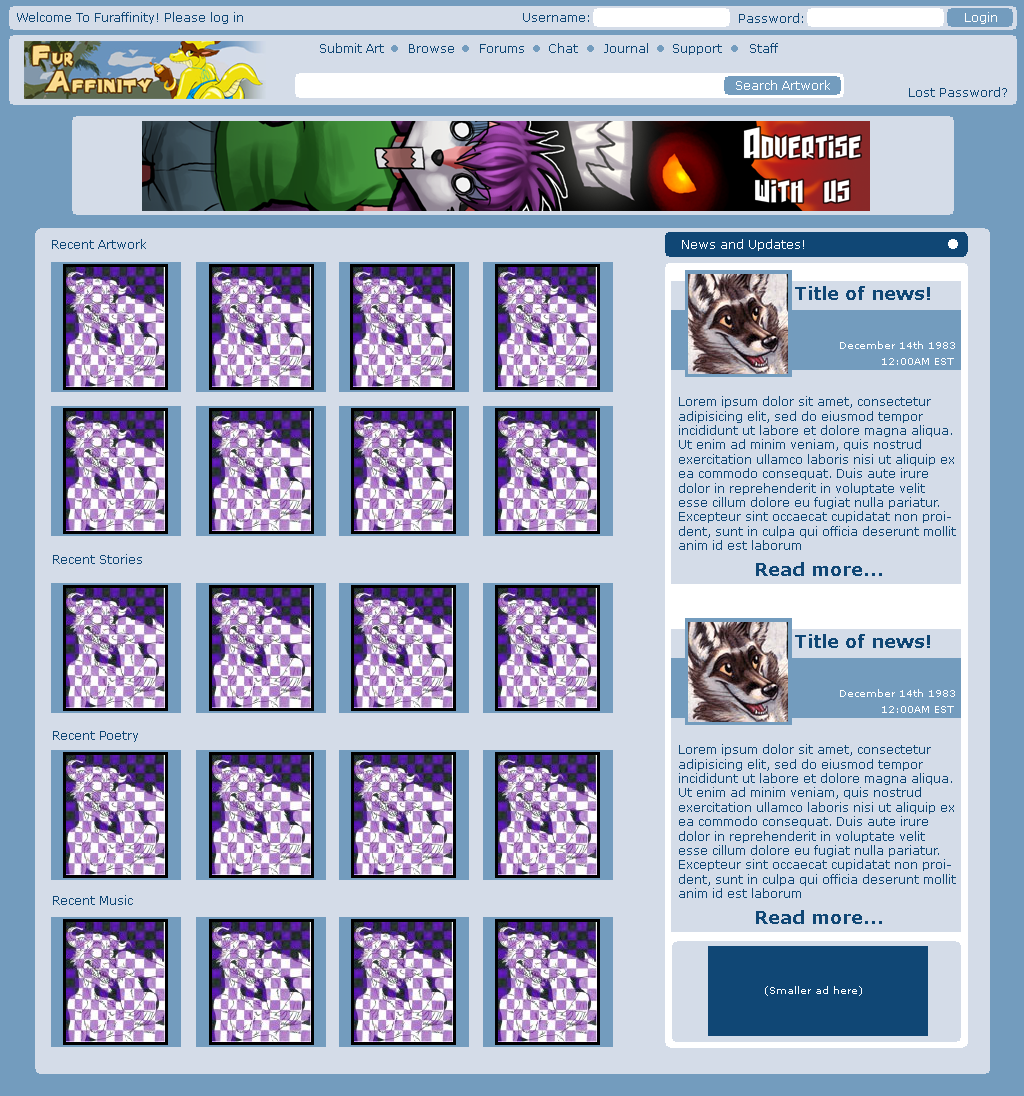
<style>
.page{position:relative;width:1024px;height:1096px;background:#d4dce8}
.page>*{position:absolute;margin:0}
.t1{font:12px "Verdana";color:#104775}
.t2{font:12px "Verdana";color:#ffffff}
.t3{font:18px "Verdana-Bold";color:#104775}
.t4{font:10px "Verdana";color:#ffffff}
</style>
<div class="page">
<p class="t1" style="left:17px;top:12px;width:226px;height:12px">Welcome To Furaffinity! Please log in</p>
<p class="t1" style="left:523px;top:13px;width:66px;height:9px">Username:</p>
<p class="t1" style="left:739px;top:13px;width:64px;height:10px">Password:</p>
<p class="t2" style="left:965px;top:12px;width:32px;height:12px">Login</p>
<p class="t1" style="left:320px;top:43px;width:64px;height:10px">Submit Art</p>
<p class="t1" style="left:409px;top:44px;width:45px;height:9px">Browse</p>
<p class="t1" style="left:480px;top:44px;width:44px;height:9px">Forums</p>
<p class="t1" style="left:549px;top:43px;width:29px;height:10px">Chat</p>
<p class="t1" style="left:604px;top:43px;width:44px;height:10px">Journal</p>
<p class="t1" style="left:673px;top:44px;width:49px;height:11px">Support</p>
<p class="t1" style="left:750px;top:43px;width:28px;height:10px">Staff</p>
<p class="t2" style="left:736px;top:80px;width:94px;height:10px">Search Artwork</p>
<p class="t1" style="left:909px;top:87px;width:98px;height:10px">Lost Password?</p>
<p class="t1" style="left:52px;top:239px;width:94px;height:10px">Recent Artwork</p>
<p class="t2" style="left:682px;top:239px;width:122px;height:12px">News and Updates!</p>
<p class="t3" style="left:795px;top:286px;width:135px;height:14px">Title of news!</p>
<p class="t4" style="left:840px;top:341px;width:115px;height:8px">December 14th 1983</p>
<p class="t4" style="left:882px;top:358px;width:72px;height:7px">12:00AM EST</p>
<p class="t1" style="left:679px;top:396px;width:277px;height:154px">Lorem ipsum dolor sit amet, consectetur adipisicing elit, sed do eiusmod tempor incididunt ut labore et dolore magna aliqua. Ut enim ad minim veniam, quis nostrud exercitation ullamco laboris nisi ut aliquip ex ea commodo consequat. Duis aute irure dolor in reprehenderit in voluptate velit esse cillum dolore eu fugiat nulla pariatur. Excepteur sint occaecat cupidatat non proident, sunt in culpa qui officia deserunt mollit anim id est laborum</p>
<p class="t1" style="left:53px;top:554px;width:89px;height:10px">Recent Stories</p>
<p class="t3" style="left:756px;top:562px;width:126px;height:14px">Read more...</p>
<p class="t3" style="left:795px;top:634px;width:135px;height:14px">Title of news!</p>
<p class="t4" style="left:840px;top:689px;width:115px;height:8px">December 14th 1983</p>
<p class="t4" style="left:882px;top:706px;width:72px;height:7px">12:00AM EST</p>
<p class="t1" style="left:53px;top:731px;width:85px;height:11px">Recent Poetry</p>
<p class="t1" style="left:679px;top:744px;width:277px;height:154px">Lorem ipsum dolor sit amet, consectetur adipisicing elit, sed do eiusmod tempor incididunt ut labore et dolore magna aliqua. Ut enim ad minim veniam, quis nostrud exercitation ullamco laboris nisi ut aliquip ex ea commodo consequat. Duis aute irure dolor in reprehenderit in voluptate velit esse cillum dolore eu fugiat nulla pariatur. Excepteur sint occaecat cupidatat non proident, sunt in culpa qui officia deserunt mollit anim id est laborum</p>
<p class="t1" style="left:53px;top:895px;width:80px;height:10px">Recent Music</p>
<p class="t3" style="left:756px;top:910px;width:126px;height:14px">Read more...</p>
<p class="t4" style="left:765px;top:986px;width:97px;height:10px">(Smaller ad here)</p>
</div>
